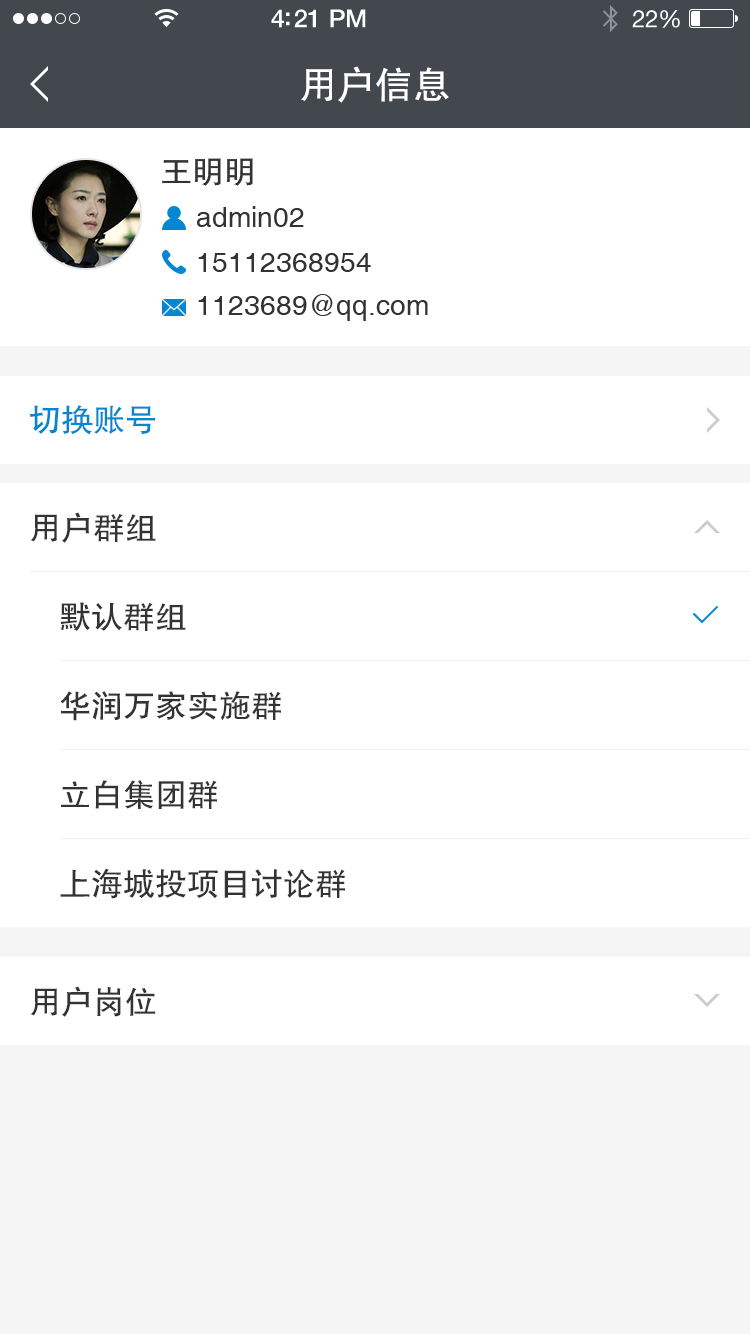
<style>
.page{position:relative;width:750px;height:1334px;background:#ffffff}
.page>*{position:absolute;margin:0}
.t1{font:38px "FZHTJW--GB1-0";color:#ffffff}
.t2{font:32px "FZHTJW--GB1-0";color:#333333}
.t3{font:28px "Helvetica";color:#333333}
.t4{font:32.1px "FZHTJW--GB1-0";color:#0487d0}
.t5{font:32.1px "FZHTJW--GB1-0";color:#333333}
.t6{font:32.2px "FZHTJW--GB1-0";color:#333333}
</style>
<div class="page">
<p class="t1" style="left:301px;top:66px;width:148px;height:37px">用户信息</p>
<p class="t2" style="left:162px;top:158px;width:91px;height:28px">王明明</p>
<p class="t3" style="left:197px;top:206px;width:107px;height:21px">admin02</p>
<p class="t3" style="left:198px;top:253px;width:173px;height:19px">15112368954</p>
<p class="t3" style="left:198px;top:294px;width:230px;height:27px">1123689@qq.com</p>
<p class="t4" style="left:30px;top:405px;width:125px;height:30px">切换账号</p>
<p class="t5" style="left:30px;top:512px;width:126px;height:31px">用户群组</p>
<p class="t5" style="left:60px;top:602px;width:126px;height:29px">默认群组</p>
<p class="t5" style="left:60px;top:691px;width:221px;height:30px">华润万家实施群</p>
<p class="t5" style="left:61px;top:780px;width:156px;height:29px">立白集团群</p>
<p class="t6" style="left:60px;top:868px;width:285px;height:31px">上海城投项目讨论群</p>
<p class="t5" style="left:30px;top:986px;width:126px;height:31px">用户岗位</p>
</div>
